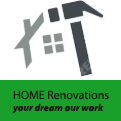
<style>
.page{position:relative;width:121px;height:121px;background:#ffffff}
.page>*{position:absolute;margin:0}
.t1{font:10px "MyriadPro-BoldIt";color:#181514}
.t2{font:12px "MyriadPro-Regular";color:#181514}
</style>
<div class="page">
<p class="t1" style="left:12px;top:90px;width:97px;height:24px"><span class="t2">HOME Renovations<br></span>your dream our work</p>
</div>
